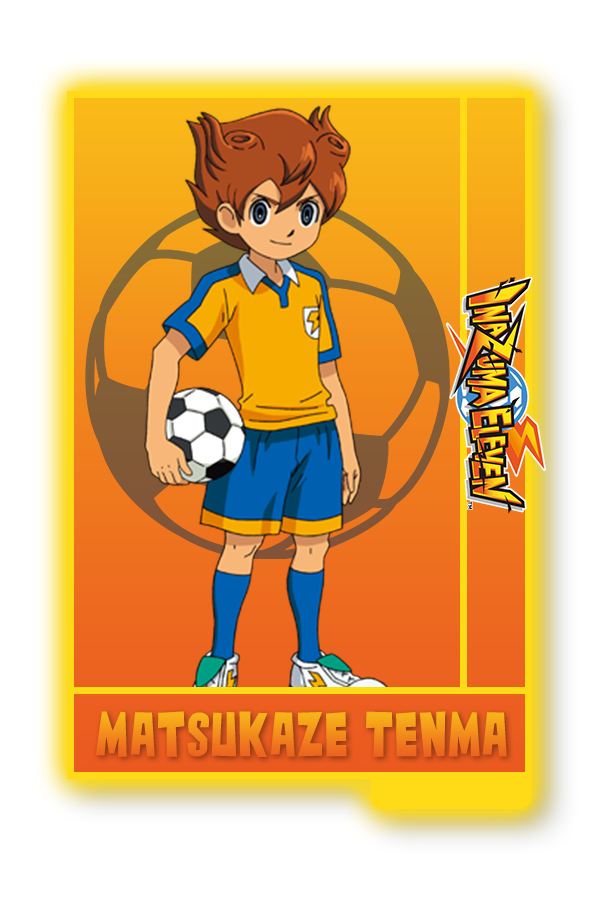
<style>
.page{position:relative;width:600px;height:900px;background:#ffffff}
.page>*{position:absolute;margin:0}
.t1{font:65.2px "TTG-Bold"}
</style>
<div class="page">
<p class="t1" style="left:96px;top:711px;width:411px;height:46px">Matsukaze Tenma</p>
</div>
